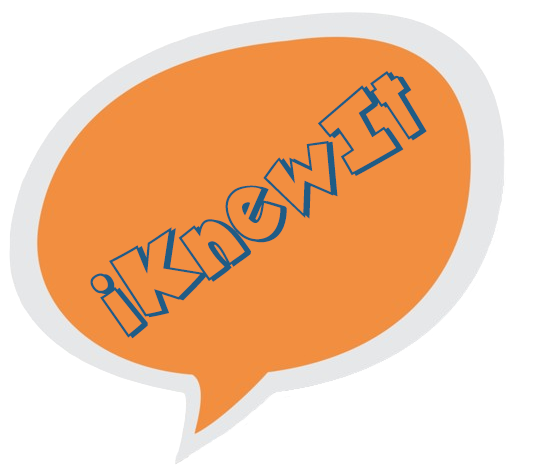
<style>
.page{position:relative;width:537px;height:465px;background:#f28e40}
.page>*{position:absolute;margin:0}
.t1{font:100px "ZubiloShadow";color:#1f5c85}
</style>
<div class="page">
<p class="t1" style="left:90px;top:71px;width:337px;height:268px;rotate:-35deg">iKnewIt</p>
</div>
